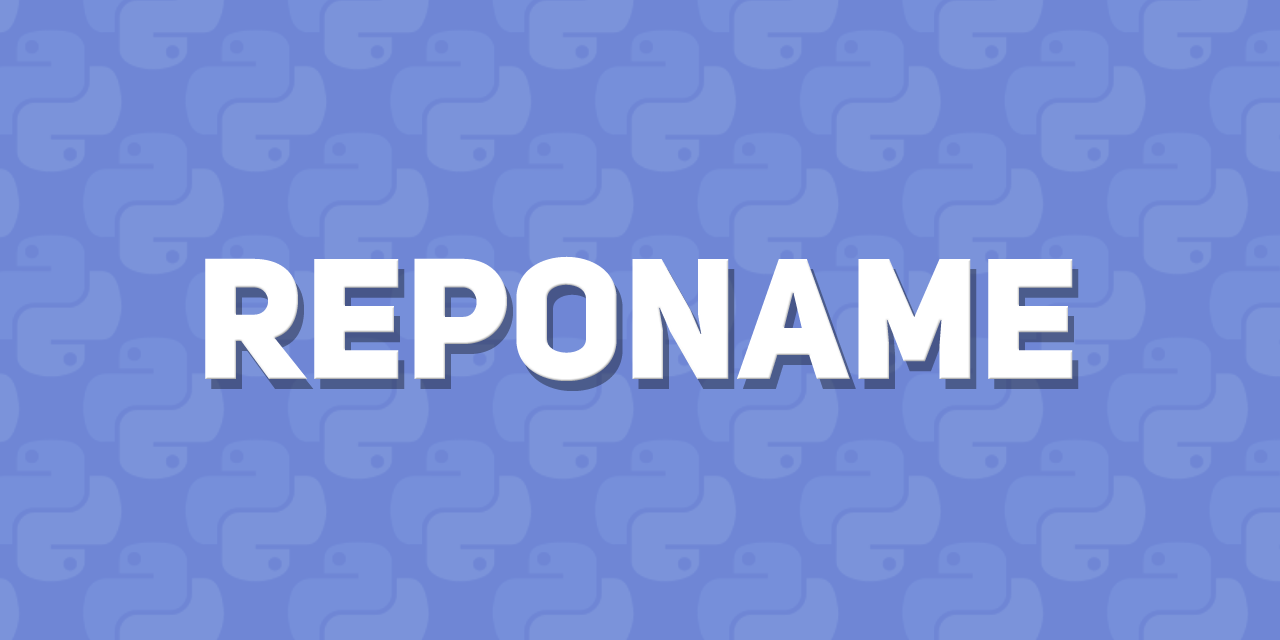
<style>
.page{position:relative;width:1280px;height:640px;background:#6f86d5}
.page>*{position:absolute;margin:0}
.t1{font:170px "UniSansHeavyCAPS";color:#ffffff}
</style>
<div class="page">
<p class="t1" style="left:205px;top:256px;width:868px;height:125px">REPONAME</p>
</div>
